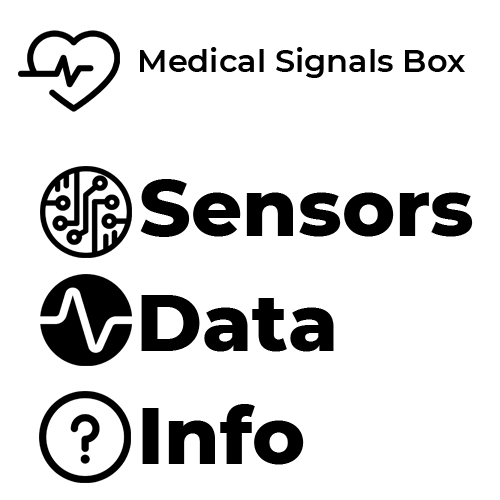
<style>
.page{position:relative;width:500px;height:500px;background:#ffffff}
.page>*{position:absolute;margin:0}
.t1{font:32px "Montserrat-SemiBold";color:#000000}
.t2{font:80px "Montserrat-ExtraBold";color:#000000}
</style>
<div class="page">
<p class="t1" style="left:140px;top:47px;width:325px;height:31px">Medical Signals Box</p>
<p class="t2" style="left:140px;top:179px;width:333px;height:58px">Sensors</p>
<p class="t2" style="left:141px;top:295px;width:193px;height:57px">Data</p>
<p class="t2" style="left:142px;top:404px;width:162px;height:61px">Info</p>
</div>
